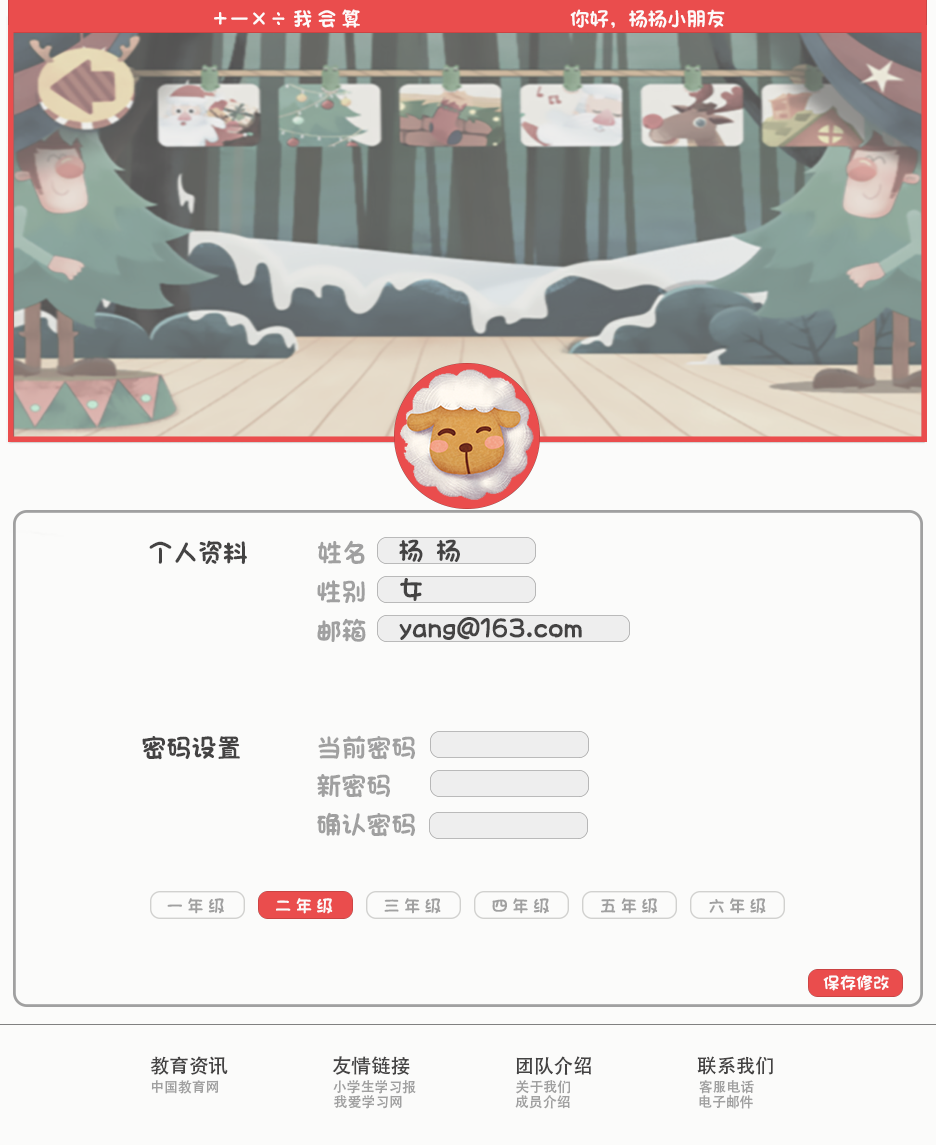
<style>
.page{position:relative;width:936px;height:1145px;background:#fbfbfa}
.page>*{position:absolute;margin:0}
.t1{font:19.4px "ARTianniuGB-Heavy";color:#fdfafa}
.t2{font:25px/19.4px "ARTianniuGB-Heavy";color:#a0a0a0}
.t3{font:25px/19.4px "ARTianniuGB-Heavy";color:#444343}
.t4{font:16.7px "ARTianniuGB-Heavy";color:#a0a0a0}
.t5{font:16.7px "ARTianniuGB-Heavy";color:#fbfafa}
.t6{font:16.7px "ARTianniuGB-Heavy";color:#fcfbfb}
.t7{font:13.9px/19.4px "AdobeHeitiStd-Regular";color:#a0a0a0}
.t8{font:19.4px/19.4px "AdobeHeitiStd-Regular";color:#444343}
</style>
<div class="page">
<p class="t1" style="left:214px;top:9px;width:511px;height:19px">＋－×÷ 我 会 算                                           你好，杨杨小朋友</p>
<p class="t2" style="left:142px;top:540px;width:273px;height:297px"><span class="t3">个人资料</span>           姓名<br>                   <br>                            性别<br><br>                            邮箱<br><br>                            <br><br><br><br><span class="t3">密码设置            </span>当前密码<br><br>                            新密码<br><br>                            确认密码</p>
<p class="t3" style="left:399px;top:539px;width:183px;height:101px">杨  杨<br><br>女<br><br>yang@163.com</p>
<p class="t4" style="left:167px;top:898px;width:599px;height:16px">一 年 级            <span class="t5">二 年 级</span>            三 年 级            四 年 级            五 年 级            六 年 级</p>
<p class="t6" style="left:823px;top:975px;width:66px;height:16px">保存修改</p>
<p class="t7" style="left:150px;top:1056px;width:623px;height:53px"><span class="t8">教育资讯                        友情链接                        团队介绍                        联系我们<br></span>中国教育网                          小学生学习报                                关于我们                                         客服电话<br>                                                           我爱学习网                                    成员介绍                                         电子邮件</p>
</div>
